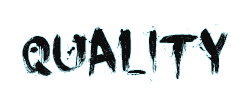
<style>
.page{position:relative;width:250px;height:100px;background:#ffffff}
.page>*{position:absolute;margin:0}
.t1{font:60px "FaceYourFears";color:#0e0e0e}
</style>
<div class="page">
<p class="t1" style="left:22px;top:24px;width:206px;height:58px">Quality</p>
</div>
